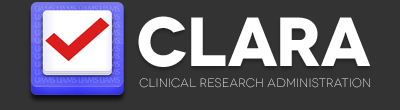
<style>
.page{position:relative;width:400px;height:110px;background:#333333}
.page>*{position:absolute;margin:0}
.t1{font:69.2px "Novecentowide-Bold";letter-spacing:-0.01em;color:#ffffff}
.t2{font:12px "Novecentowide-Light";letter-spacing:0.025em}
</style>
<div class="page">
<p class="t1" style="left:138px;top:16px;width:233px;height:51px">CLARA</p>
<p class="t2" style="left:139px;top:78px;width:231px;height:10px">clinical research administration</p>
</div>
